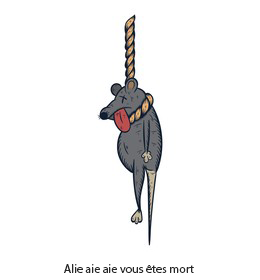
<style>
.page{position:relative;width:260px;height:280px;background:#ffffff}
.page>*{position:absolute;margin:0}
.t1{font:12px "MyriadPro-Regular";color:#282828}
</style>
<div class="page">
<p class="t1" style="left:64px;top:264px;width:130px;height:9px">AIie aie aie vous êtes mort</p>
</div>
